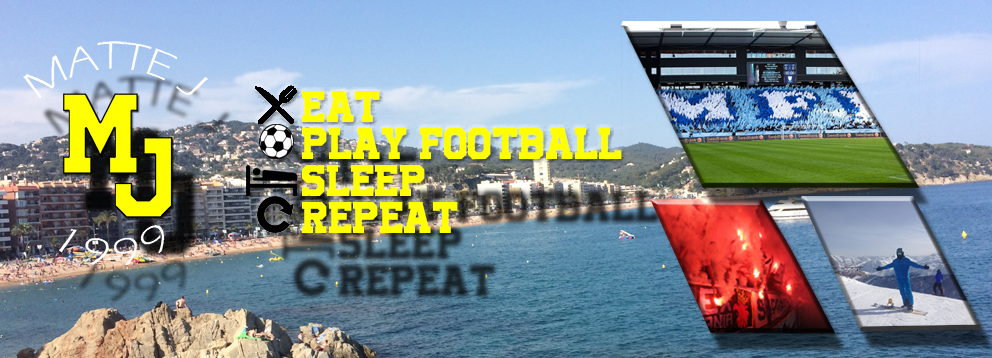
<style>
.page{position:relative;width:992px;height:358px}
.page>*{position:absolute;margin:0}
.t1{font:31px "UniversityRegular";color:#ffff00}
</style>
<div class="page">
<p class="t1" style="left:302px;top:91px;width:320px;height:142px">Eat<br>PLay Football<br>Sleep<br>Repeat</p>
</div>
